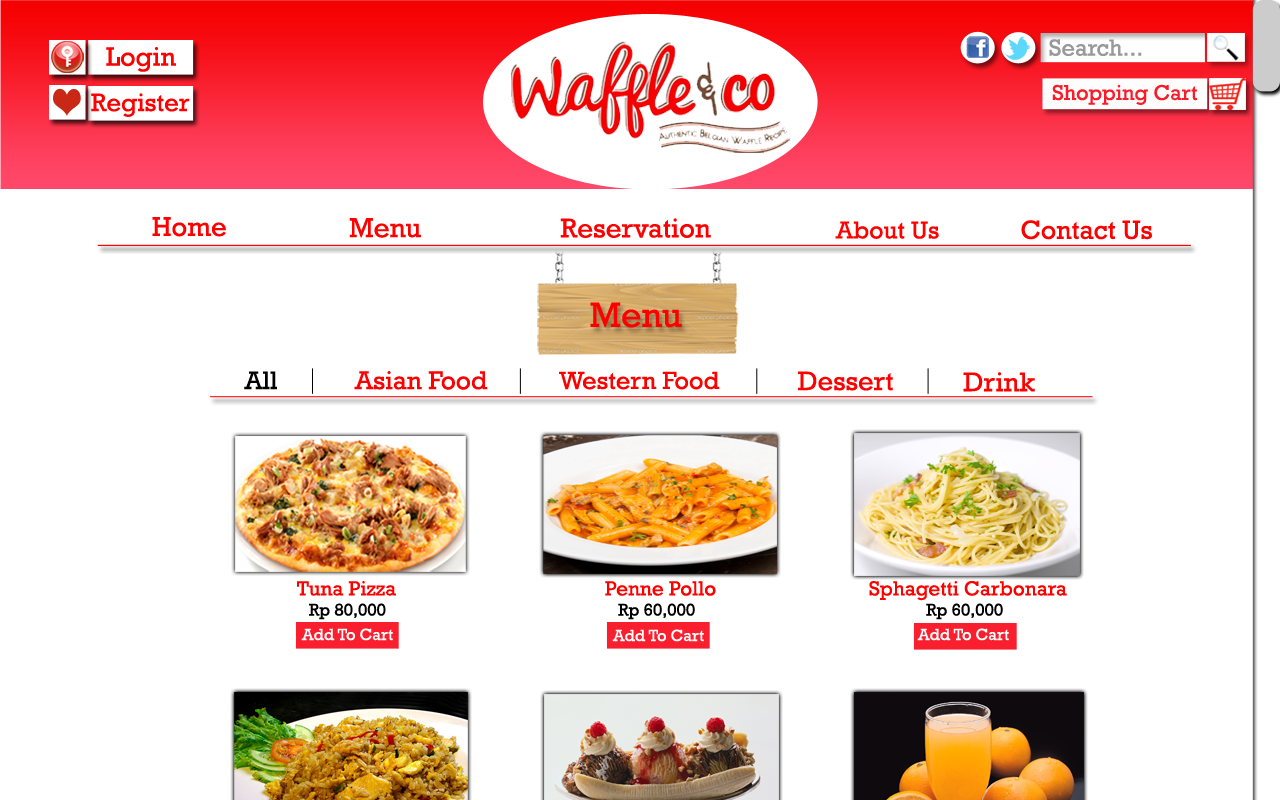
<style>
.page{position:relative;width:1280px;height:800px;background:#ffffff}
.page>*{position:absolute;margin:0}
.t1{font:27.5px "Rockwell";color:#fe0000}
.t2{font:28px "Rockwell";color:#fe0000}
.t3{font:27.6px "Rockwell";color:#fe0000}
.t4{font:24.9px "Rockwell";color:#fe0000}
.t5{font:26.7px "Rockwell";color:#fe0000}
.t6{font:35.8px "Rockwell";color:#fe0000}
.t7{font:25.7px "Rockwell";color:#000000}
.t8{font:26.3px "Rockwell";color:#fe0000}
.t9{font:25.3px "Rockwell";color:#fe0000}
.t10{font:27.2px "Rockwell";color:#fe0000}
.t11{font:20.8px "Rockwell";color:#fe0000}
.t12{font:17.2px "Rockwell";color:#000000}
.t13{font:16.5px "Rockwell";color:#ffffff}
</style>
<div class="page">
<p class="t1" style="left:152px;top:217px;width:74px;height:20px">Home</p>
<p class="t2" style="left:349px;top:218px;width:72px;height:20px">Menu</p>
<p class="t3" style="left:560px;top:218px;width:151px;height:20px">Reservation</p>
<p class="t4" style="left:835px;top:221px;width:104px;height:18px">About Us</p>
<p class="t5" style="left:1021px;top:220px;width:131px;height:20px">Contact Us</p>
<p class="t6" style="left:590px;top:302px;width:92px;height:26px">Menu</p>
<p class="t7" style="left:244px;top:371px;width:33px;height:19px">All</p>
<p class="t8" style="left:354px;top:371px;width:134px;height:19px">Asian Food</p>
<p class="t9" style="left:559px;top:371px;width:161px;height:19px">Western Food</p>
<p class="t10" style="left:798px;top:371px;width:95px;height:20px">Dessert</p>
<p class="t1" style="left:963px;top:372px;width:72px;height:20px">Drink</p>
<p class="t11" style="left:297px;top:581px;width:99px;height:15px">Tuna Pizza</p>
<p class="t11" style="left:605px;top:581px;width:111px;height:15px">Penne Pollo</p>
<p class="t11" style="left:869px;top:581px;width:198px;height:20px">Sphagetti Carbonara</p>
<p class="t12" style="left:309px;top:603px;width:77px;height:17px">Rp 80,000</p>
<p class="t12" style="left:618px;top:603px;width:77px;height:17px">Rp 60,000</p>
<p class="t12" style="left:926px;top:603px;width:77px;height:17px">Rp 60,000</p>
<p class="t13" style="left:301px;top:628px;width:92px;height:13px">Add To Cart</p>
<p class="t13" style="left:612px;top:629px;width:92px;height:13px">Add To Cart</p>
<p class="t13" style="left:917px;top:628px;width:92px;height:13px">Add To Cart</p>
</div>
